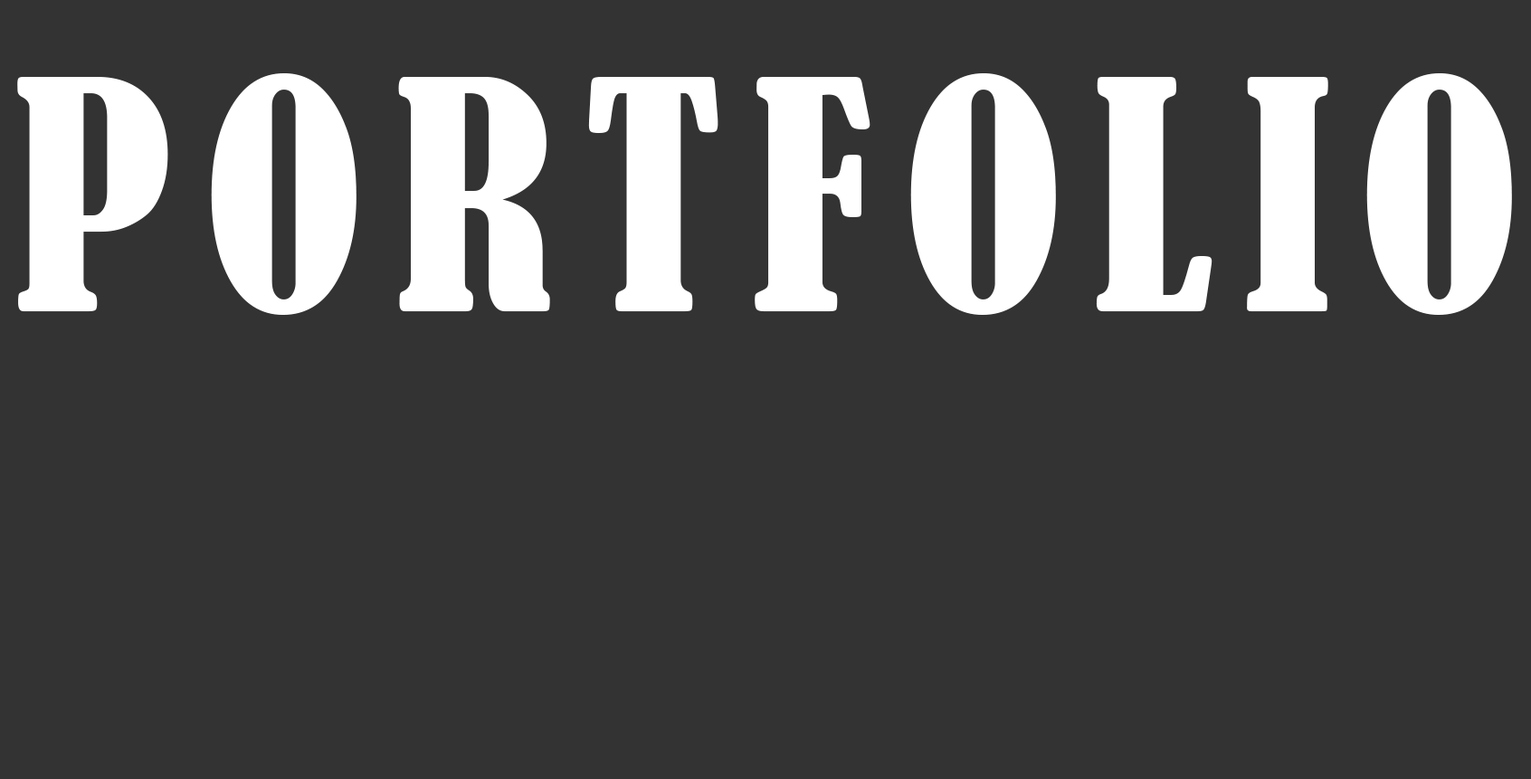
<style>
.page{position:relative;width:1531px;height:779px;background:#333333}
.page>*{position:absolute;margin:0}
.t1{font:211.2px "BernardMT-Condensed";letter-spacing:0.1em;color:#ffffff;text-transform:uppercase}
</style>
<div class="page">
<p class="t1" style="left:17px;top:73px;width:1495px;height:242px">PORTFOLIO</p>
</div>
